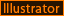
<style>
.page{position:relative;width:64px;height:16px;background:#261300}
.page>*{position:absolute;margin:0}
.t1{font:12.3px "KozGoPr6N-Regular";letter-spacing:0.005em;color:#ff7c00}
.t2{font:12.3px "KozGoPr6N-Regular";letter-spacing:0.05em;color:#ff7c00}
.t3{font:12.3px "KozGoPr6N-Regular";letter-spacing:0.01em;color:#ff7c00}
.t4{font:12.3px "KozGoPr6N-Regular";letter-spacing:0.025em;color:#ff7c00}
</style>
<div class="page">
<p class="t1" style="left:4px;top:3px;width:56px;height:10px">Illu<span class="t2">s</span><span class="t3">t</span><span class="t2">ra</span><span class="t4">t</span><span class="t2">or</span></p>
</div>
